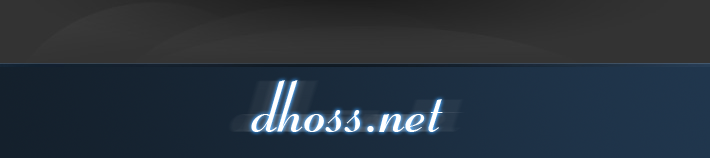
<style>
.page{position:relative;width:710px;height:158px}
.page>*{position:absolute;margin:0}
.t1{font:80px "Ribbon131BT-Bold";color:#ffffff}
.t2{font:72px "Ribbon131BT-Bold";color:#ffffff}
</style>
<div class="page">
<p class="t1" style="left:251px;top:80px;width:192px;height:52px">dhoss.ne<span class="t2">t</span></p>
</div>
